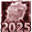
<style>
.page{position:relative;width:32px;height:32px}
.page>*{position:absolute;margin:0}
.t1{font:12px "MicrosoftYaHeiUI-Bold"}
</style>
<div class="page">
<p class="t1" style="left:1px;top:21px;width:29px;height:11px">2025</p>
<p class="t1" style="left:1px;top:22px;width:30px;height:11px">2025</p>
</div>
